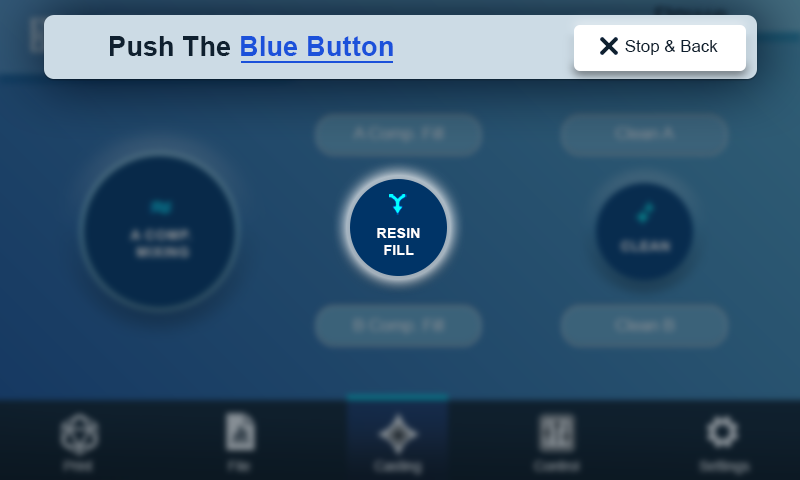
<style>
.page{position:relative;width:800px;height:480px}
.page>*{position:absolute;margin:0}
.t1{font:27.1px "Arial-BoldMT";letter-spacing:0.01em;color:#1b51da}
.t2{font:27.1px "Arial-BoldMT";letter-spacing:0.01em;color:#0f202f}
.t3{font:16.7px "ArialMT";letter-spacing:0.01em;color:#0f202f}
.t4{font:14.4px "Arial-BoldMT";color:#ffffff}
</style>
<div class="page">
<p class="t1" style="left:110px;top:36px;width:283px;height:20px"><span class="t2">Push The </span>Blue Button</p>
<p class="t3" style="left:625px;top:40px;width:93px;height:15px">Stop &amp; Back</p>
<p class="t4" style="left:377px;top:228px;width:43px;height:27px;text-align:center">RESIN<br>FILL</p>
</div>
